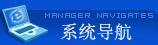
<style>
.page{position:relative;width:158px;height:45px;background:#0650d2}
.page>*{position:absolute;margin:0}
.t1{font:18px "SimSun";color:#ffffff}
</style>
<div class="page">
<p class="t1" style="left:61px;top:23px;width:71px;height:18px">系统导航</p>
</div>
